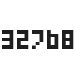
<style>
.page{position:relative;width:74px;height:74px;background:#ffffff}
.page>*{position:absolute;margin:0}
.t1{font:30px "04b24";color:#1f1f1f}
</style>
<div class="page">
<p class="t1" style="left:2px;top:30px;width:72px;height:19px">32768</p>
</div>
